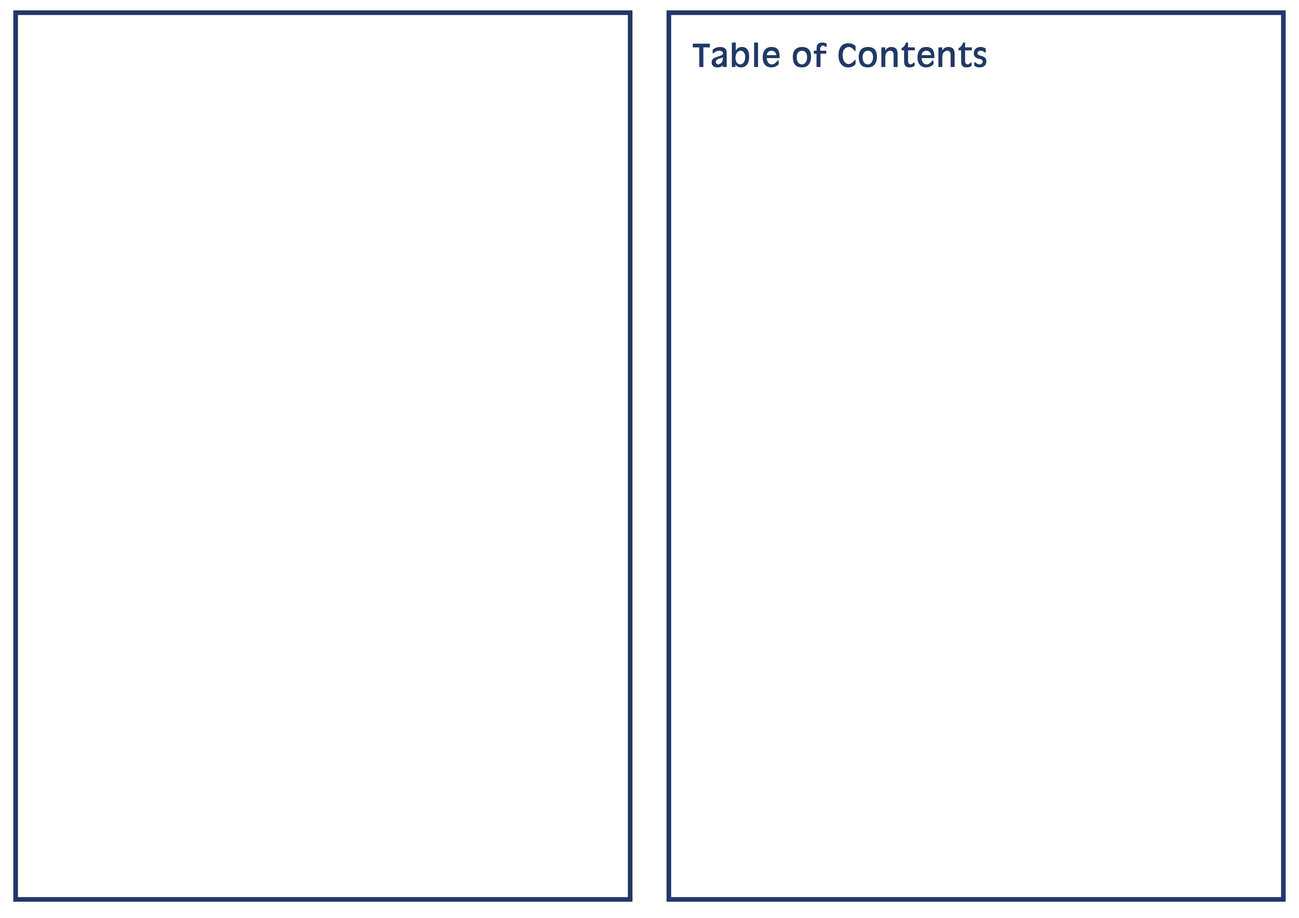
<style>
.page{position:relative;width:1299px;height:918px;background:#ffffff}
.page>*{position:absolute;margin:0}
.t1{font:30.9px "AntiqueOlive";color:#213967;font-weight:bold}
</style>
<div class="page">
<p class="t1" style="left:692px;top:43px;width:294px;height:24px">Table of Contents</p>
</div>
